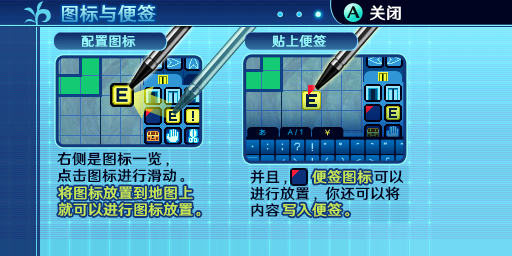
<style>
.page{position:relative;width:512px;height:256px}
.page>*{position:absolute;margin:0}
.t1{font:18.7px "HYWenHei-FEW";letter-spacing:0.025em}
.t2{font:16px "HYWenHei-FEW";letter-spacing:0.025em;color:#fefefe}
.t3{font:13.3px "HYWenHei-FEW";letter-spacing:0.025em;color:#94f7ff}
.t4{font:14.7px/16.7px "HYWenHei-FEW";letter-spacing:0.025em;color:#000421}
.t5{font:14.7px "HYWenHei-FEW";letter-spacing:0.025em;color:#c6e752}
.t6{font:14.7px/16.7px "HYWenHei-FEW";letter-spacing:0.025em;color:#c6e752}
</style>
<div class="page">
<p class="t1" style="left:62px;top:5px;width:94px;height:18px">图标与便签</p>
<p class="t2" style="left:370px;top:5px;width:31px;height:16px">关闭</p>
<p class="t3" style="left:81px;top:35px;width:55px;height:13px">配置图标</p>
<p class="t3" style="left:272px;top:34px;width:54px;height:14px">贴上便签</p>
<p class="t4" style="left:57px;top:152px;width:128px;height:31px">右侧是图标一览，<br>点击图标进行滑动。</p>
<p class="t4" style="left:250px;top:170px;width:154px;height:47px">并且，               可以<br>进行放置，你还可以将<br>内容</p>
<p class="t5" style="left:312px;top:170px;width:60px;height:14px">便签图标</p>
<p class="t6" style="left:58px;top:186px;width:143px;height:31px">将图标放置到地图上<br>就可以进行图标放置。</p>
<p class="t5" style="left:283px;top:203px;width:67px;height:14px">写入便签。</p>
</div>
